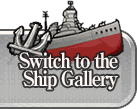
<style>
.page{position:relative;width:137px;height:109px;background:#ffffff}
.page>*{position:absolute;margin:0}
.t1{font:21px/18px "RyuminPro-ExBold";letter-spacing:-0.08em;color:#fff8f4;scale:0.9 1}
</style>
<div class="page">
<p class="t1" style="left:19px;top:52px;width:99px;height:38px;text-align:center">Switch to the <br>Ship Gallery</p>
</div>
